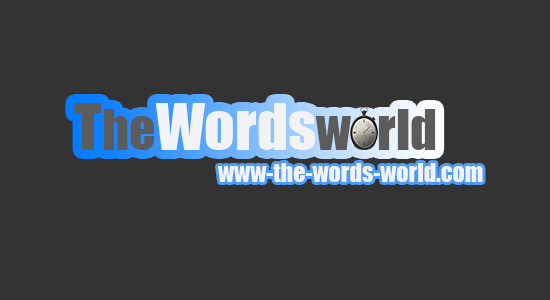
<style>
.page{position:relative;width:550px;height:300px;background:#333333}
.page>*{position:absolute;margin:0}
.t1{font:60px "Impact";color:#f2f3f5}
.t2{font:60px "Impact";color:#5c5c5c}
.t3{font:52px "Impact";color:#5c5c5c}
.t4{font:24px "Impact";color:#f2f3f5}
</style>
<div class="page">
<p class="t1" style="left:74px;top:103px;width:362px;height:47px"><span class="t2">T</span><span class="t3">he</span>Words<span class="t3">world</span></p>
<p class="t4" style="left:218px;top:163px;width:265px;height:19px">www-the-words-world.com</p>
</div>
